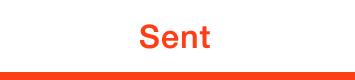
<style>
.page{position:relative;width:355px;height:80px;background:#ffffff}
.page>*{position:absolute;margin:0}
.t1{font:32px "HelveticaNeueLTStd-Md";letter-spacing:0.04em;color:#ff3e15}
</style>
<div class="page">
<p class="t1" style="left:140px;top:24px;width:70px;height:25px">Sent</p>
</div>
